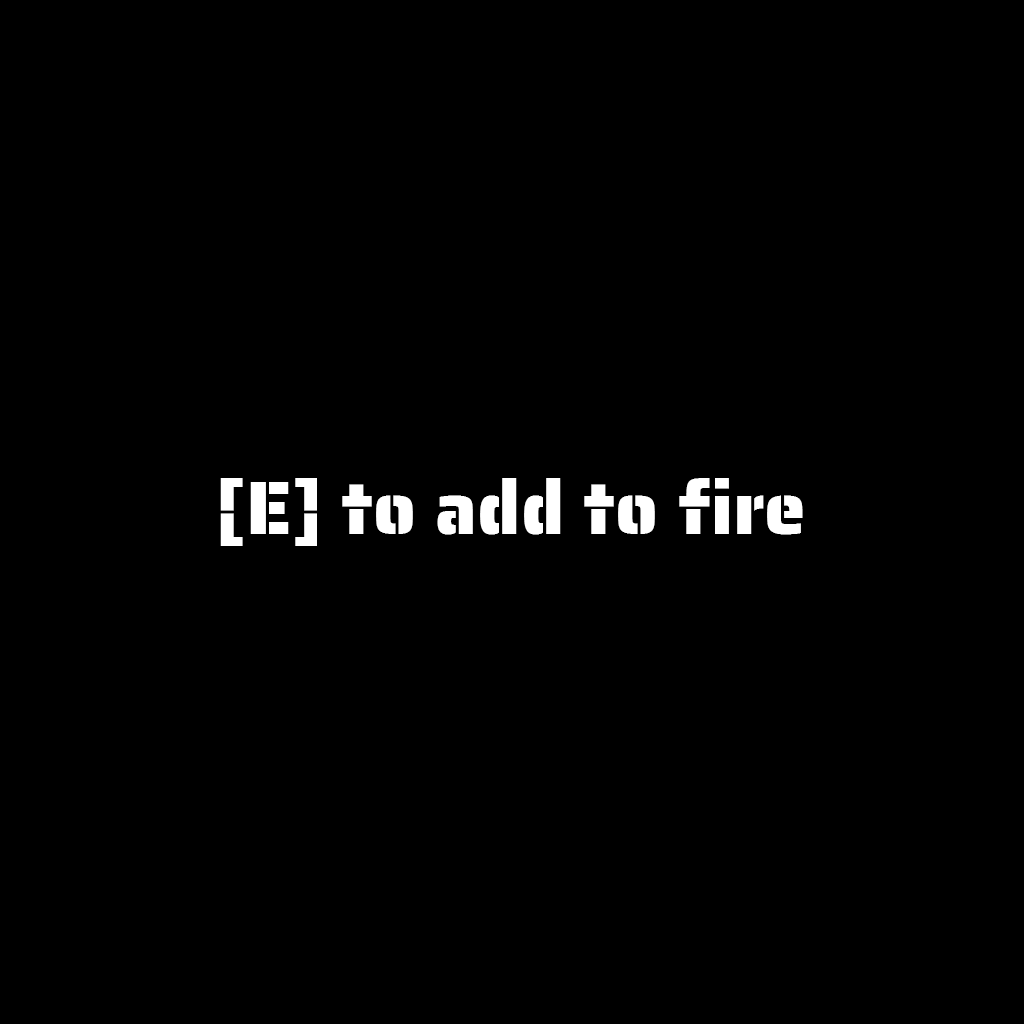
<style>
.page{position:relative;width:1024px;height:1024px;background:#000000}
.page>*{position:absolute;margin:0}
.t1{font:75px "SairaStencilOne-Regular";color:#ffffff}
</style>
<div class="page">
<p class="t1" style="left:220px;top:478px;width:583px;height:68px">[E] to add to fire</p>
</div>
